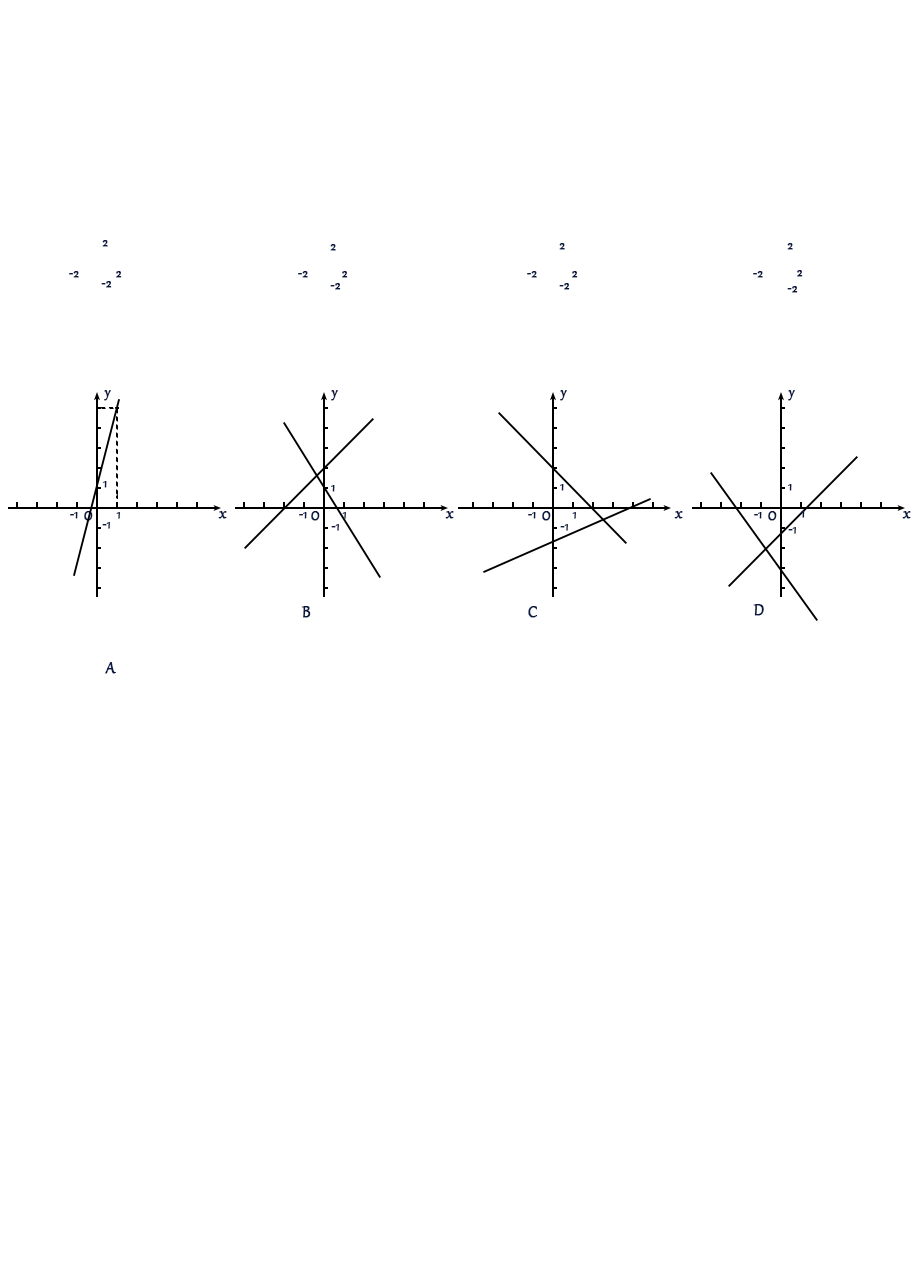
<style>
.page{position:relative;width:916px;height:1268px;background:#ffffff}
.page>*{position:absolute;margin:0}
.t1{font:12px "Gabriola";color:#081842;font-weight:bold}
.t2{font:16px "Gabriola";color:#081842;font-weight:bold}
.t3{font:12px "Gabriola";font-weight:bold}
.t4{font:18.7px "Gabriola";color:#081842;font-weight:bold}
</style>
<div class="page">
<p class="t1" style="left:102px;top:240px;width:6px;height:7px">2</p>
<p class="t1" style="left:330px;top:244px;width:6px;height:7px">2</p>
<p class="t1" style="left:559px;top:243px;width:6px;height:7px">2</p>
<p class="t1" style="left:787px;top:243px;width:6px;height:7px">2</p>
<p class="t1" style="left:797px;top:270px;width:6px;height:7px">2</p>
<p class="t1" style="left:69px;top:271px;width:10px;height:7px">-2</p>
<p class="t1" style="left:101px;top:281px;width:11px;height:7px">-2</p>
<p class="t1" style="left:116px;top:271px;width:6px;height:7px">2</p>
<p class="t1" style="left:298px;top:271px;width:10px;height:7px">-2</p>
<p class="t1" style="left:342px;top:271px;width:6px;height:7px">2</p>
<p class="t1" style="left:527px;top:271px;width:10px;height:7px">-2</p>
<p class="t1" style="left:572px;top:271px;width:6px;height:7px">2</p>
<p class="t1" style="left:753px;top:271px;width:10px;height:7px">-2</p>
<p class="t1" style="left:330px;top:283px;width:11px;height:7px">-2</p>
<p class="t1" style="left:559px;top:283px;width:11px;height:7px">-2</p>
<p class="t1" style="left:787px;top:286px;width:11px;height:7px">-2</p>
<p class="t2" style="left:104px;top:390px;width:7px;height:11px">y</p>
<p class="t2" style="left:331px;top:390px;width:7px;height:11px">y</p>
<p class="t2" style="left:560px;top:390px;width:7px;height:11px">y</p>
<p class="t2" style="left:788px;top:390px;width:7px;height:11px">y</p>
<p class="t1" style="left:103px;top:481px;width:4px;height:7px">1</p>
<p class="t1" style="left:331px;top:485px;width:4px;height:7px">1</p>
<p class="t1" style="left:560px;top:484px;width:4px;height:7px">1</p>
<p class="t1" style="left:788px;top:484px;width:4px;height:7px">1</p>
<p class="t1" style="left:70px;top:512px;width:8px;height:7px">-1</p>
<p class="t2" style="left:84px;top:511px;width:9px;height:10px">O</p>
<p class="t3" style="left:116px;top:512px;width:4px;height:7px">1</p>
<p class="t4" style="left:218px;top:511px;width:9px;height:8px">x</p>
<p class="t1" style="left:299px;top:512px;width:8px;height:7px">-1</p>
<p class="t2" style="left:311px;top:511px;width:9px;height:10px">O</p>
<p class="t4" style="left:445px;top:511px;width:9px;height:8px">x</p>
<p class="t1" style="left:528px;top:512px;width:8px;height:7px">-1</p>
<p class="t2" style="left:542px;top:511px;width:9px;height:10px">O</p>
<p class="t3" style="left:572px;top:512px;width:4px;height:7px">1</p>
<p class="t4" style="left:674px;top:511px;width:9px;height:8px">x</p>
<p class="t1" style="left:754px;top:512px;width:8px;height:7px">-1</p>
<p class="t2" style="left:768px;top:511px;width:9px;height:10px">O</p>
<p class="t1" style="left:800px;top:511px;width:5px;height:7px">1</p>
<p class="t4" style="left:902px;top:511px;width:9px;height:8px">x</p>
<p class="t1" style="left:102px;top:522px;width:8px;height:7px">-1</p>
<p class="t1" style="left:331px;top:524px;width:8px;height:7px">-1</p>
<p class="t1" style="left:560px;top:524px;width:8px;height:7px">-1</p>
<p class="t1" style="left:788px;top:527px;width:8px;height:7px">-1</p>
<p class="t4" style="left:301px;top:606px;width:10px;height:12px">B</p>
<p class="t4" style="left:528px;top:606px;width:10px;height:12px">C</p>
<p class="t4" style="left:753px;top:604px;width:11px;height:12px">D</p>
<p class="t4" style="left:105px;top:662px;width:11px;height:12px">A</p>
</div>
